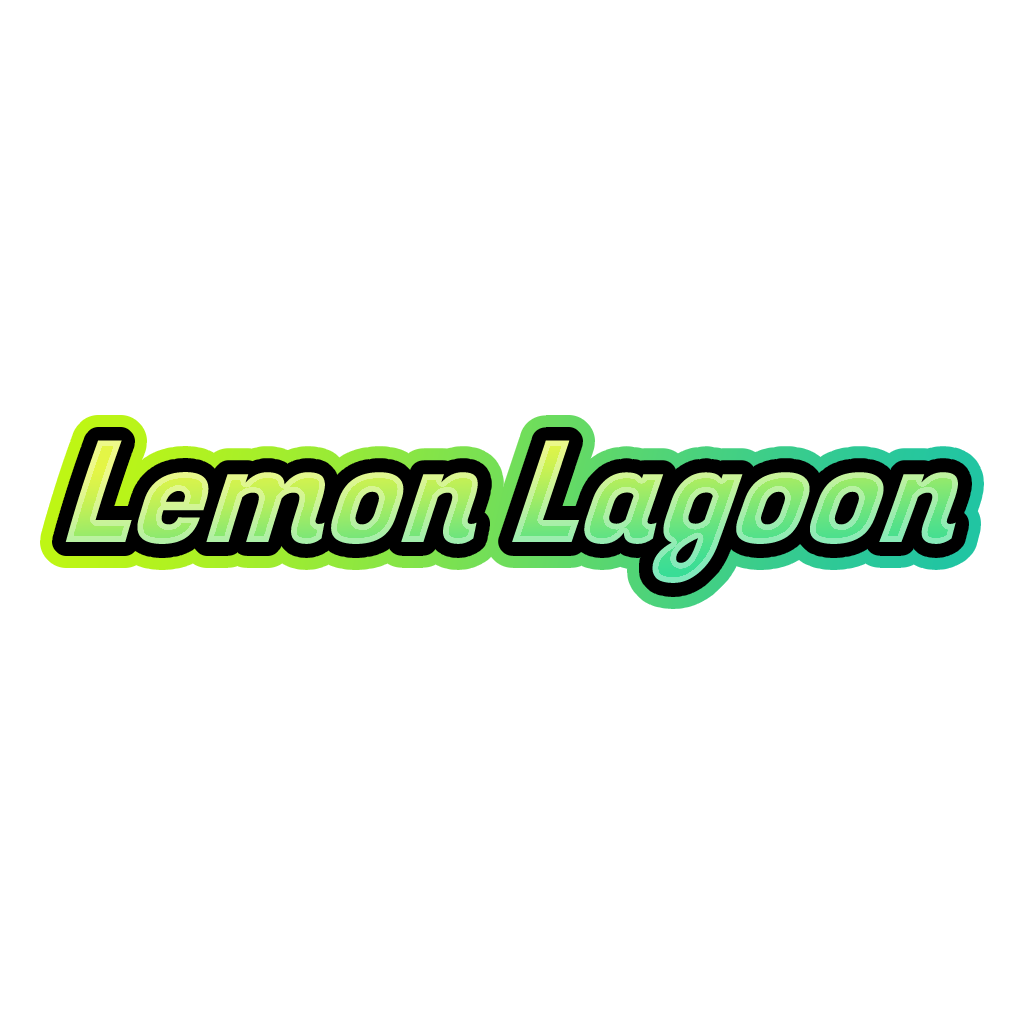
<style>
.page{position:relative;width:1024px;height:1024px;background:#ffffff}
.page>*{position:absolute;margin:0}
.t1{font:141px "FugazOne-Regular";font-style:italic;scale:0.93 1}
</style>
<div class="page">
<p class="t1" style="left:65px;top:440px;width:893px;height:143px">Lemon Lagoon</p>
</div>
